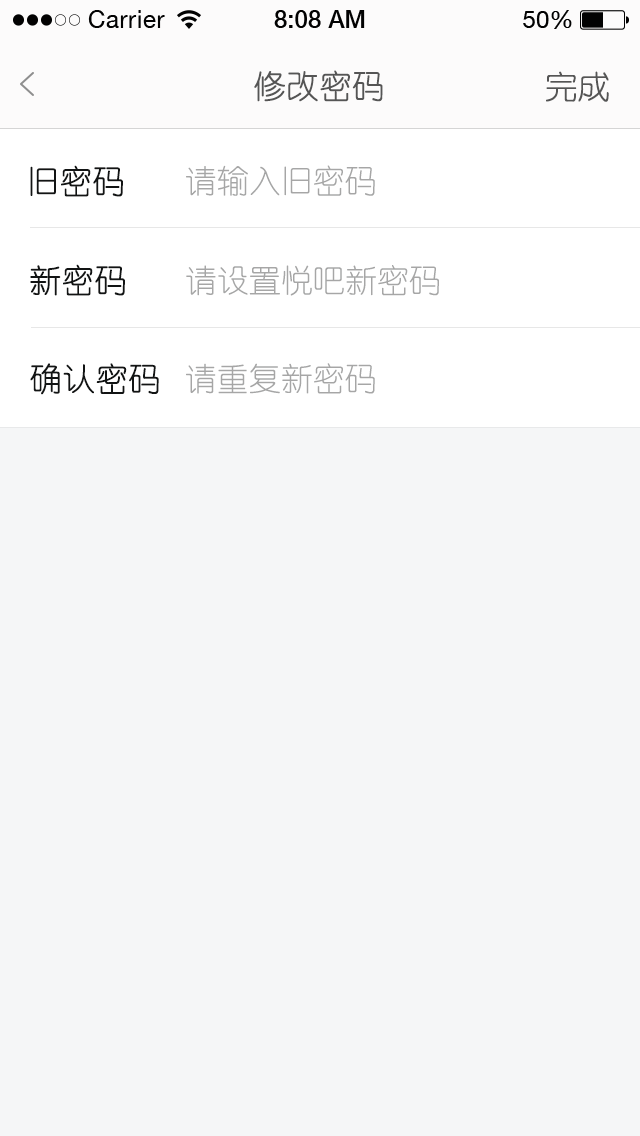
<style>
.page{position:relative;width:640px;height:1136px;background:#f5f6f7}
.page>*{position:absolute;margin:0}
.t1{font:32px "YouYuan";color:#555555;text-transform:uppercase;font-weight:bold}
.t2{font:32px "YouYuan";color:#121414;font-weight:bold}
.t3{font:32px "YouYuan";color:#a6a6a6}
</style>
<div class="page">
<p class="t1" style="left:254px;top:70px;width:129px;height:32px">修改密码</p>
<p class="t1" style="left:546px;top:71px;width:63px;height:31px">完成</p>
<p class="t2" style="left:30px;top:165px;width:93px;height:32px">旧密码</p>
<p class="t3" style="left:186px;top:165px;width:189px;height:31px">请输入旧密码</p>
<p class="t2" style="left:30px;top:264px;width:95px;height:32px">新密码</p>
<p class="t3" style="left:186px;top:265px;width:253px;height:31px">请设置悦吧新密码</p>
<p class="t2" style="left:30px;top:363px;width:129px;height:32px">确认密码</p>
<p class="t3" style="left:186px;top:363px;width:189px;height:31px">请重复新密码</p>
</div>
